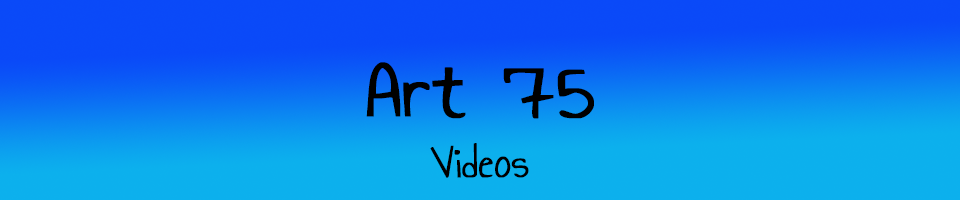
<style>
.page{position:relative;width:960px;height:200px}
.page>*{position:absolute;margin:0}
.t1{font:90px "AnnieUseYourTelescope-Regular";color:#000000;font-weight:bold}
.t2{font:45px "AnnieUseYourTelescope-Regular";color:#000000;font-weight:bold}
</style>
<div class="page">
<p class="t1" style="left:366px;top:62px;width:228px;height:57px">Art 75</p>
<p class="t2" style="left:430px;top:143px;width:99px;height:35px">Videos</p>
</div>
